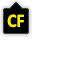
<style>
.page{position:relative;width:64px;height:64px;background:#ffffff}
.page>*{position:absolute;margin:0}
.t1{font:19px "Calibri-Bold";color:#ffea00;text-transform:uppercase;scale:0.92 1}
</style>
<div class="page">
<p class="t1" style="left:7px;top:14px;width:17px;height:14px">CF</p>
</div>
